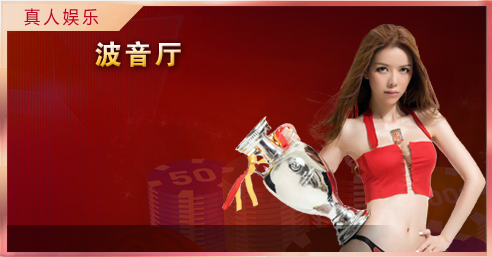
<style>
.page{position:relative;width:492px;height:257px}
.page>*{position:absolute;margin:0}
.t1{font:17.6px "MicrosoftYaHei";letter-spacing:0.22em;color:#b80624;scale:0.91 1}
.t2{font:28px "FZDHTJW--GB1-0";letter-spacing:0.08em}
</style>
<div class="page">
<p class="t1" style="left:24px;top:8px;width:75px;height:18px">真人娱乐</p>
<p class="t2" style="left:95px;top:41px;width:86px;height:26px">波音厅</p>
</div>
